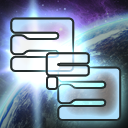
<style>
.page{position:relative;width:128px;height:128px}
.page>*{position:absolute;margin:0}
.t1{font:72px "Teio"}
.t2{font:48px "Teio";color:#f6feff}
</style>
<div class="page">
<p class="t1" style="left:12px;top:19px;width:61px;height:51px">B</p>
<p class="t2" style="left:47px;top:54px;width:41px;height:34px">f</p>
<p class="t1" style="left:59px;top:68px;width:61px;height:51px">B</p>
</div>
